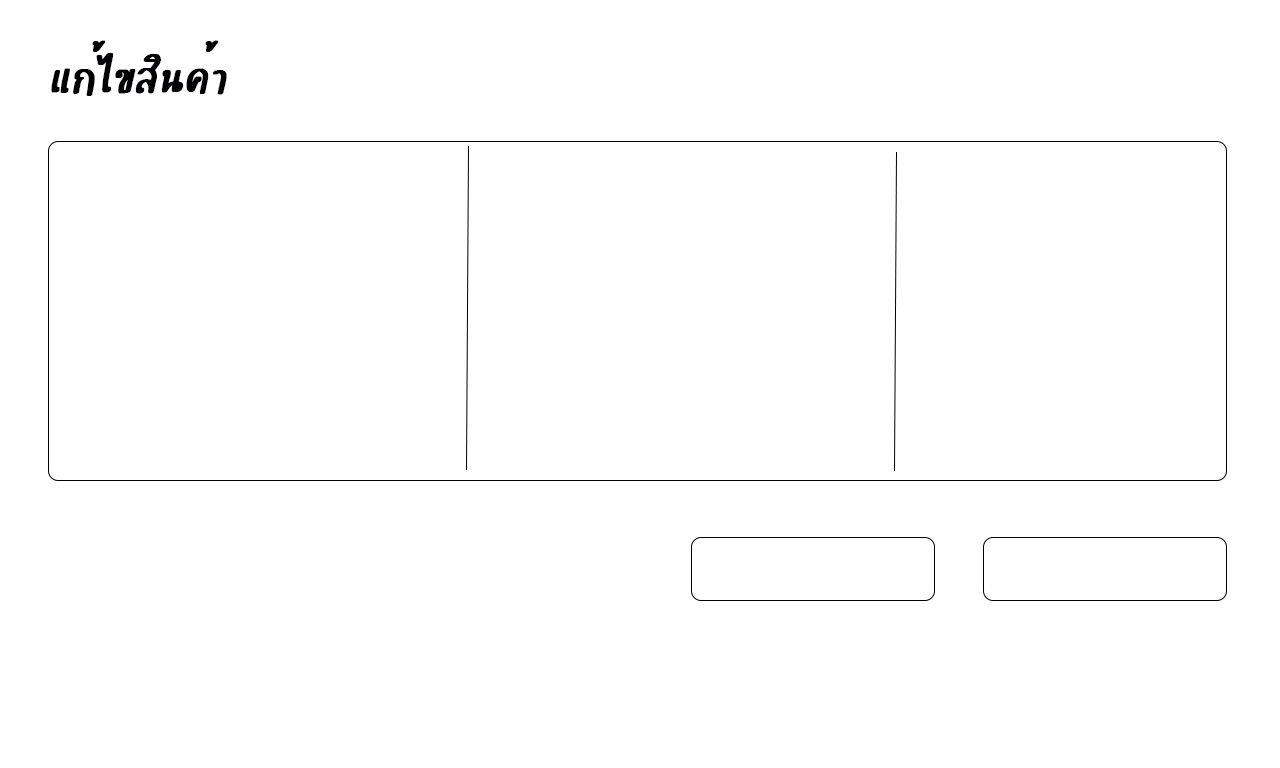
<style>
.page{position:relative;width:1280px;height:768px;background:#ffffff}
.page>*{position:absolute;margin:0}
.t1{font:61.4px "FCMarshmallowBrushItalic";color:#010002;font-weight:bold}
</style>
<div class="page">
<p class="t1" style="left:51px;top:40px;width:176px;height:56px">แก้ไขสินค้า</p>
</div>
